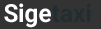
<style>
.page{position:relative;width:101px;height:29px;background:#333333}
.page>*{position:absolute;margin:0}
.t1{font:25px "Roboto-Bold";color:#ffffff}
.t2{font:25px "Roboto-Bold";color:#222d32}
</style>
<div class="page">
<p class="t1" style="left:4px;top:3px;width:87px;height:25px">Sige<span class="t2">taxi</span></p>
</div>
